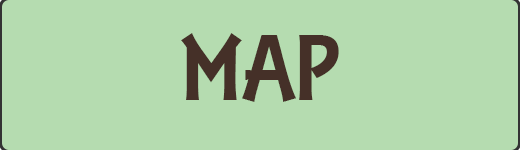
<style>
.page{position:relative;width:520px;height:150px;background:#b5dcb0}
.page>*{position:absolute;margin:0}
.t1{font:100px "ARESSENCE";color:#453028}
</style>
<div class="page">
<p class="t1" style="left:181px;top:33px;width:158px;height:69px">MAP</p>
</div>
